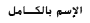
<style>
.page{position:relative;width:90px;height:23px;background:#ffffff}
.page>*{position:absolute;margin:0}
.t1{font:12px "BoutrosAdsMedium";color:#0c0b0b}
</style>
<div class="page">
<p class="t1" style="left:8px;top:6px;width:75px;height:12px">الإسم بالكـامل</p>
</div>
